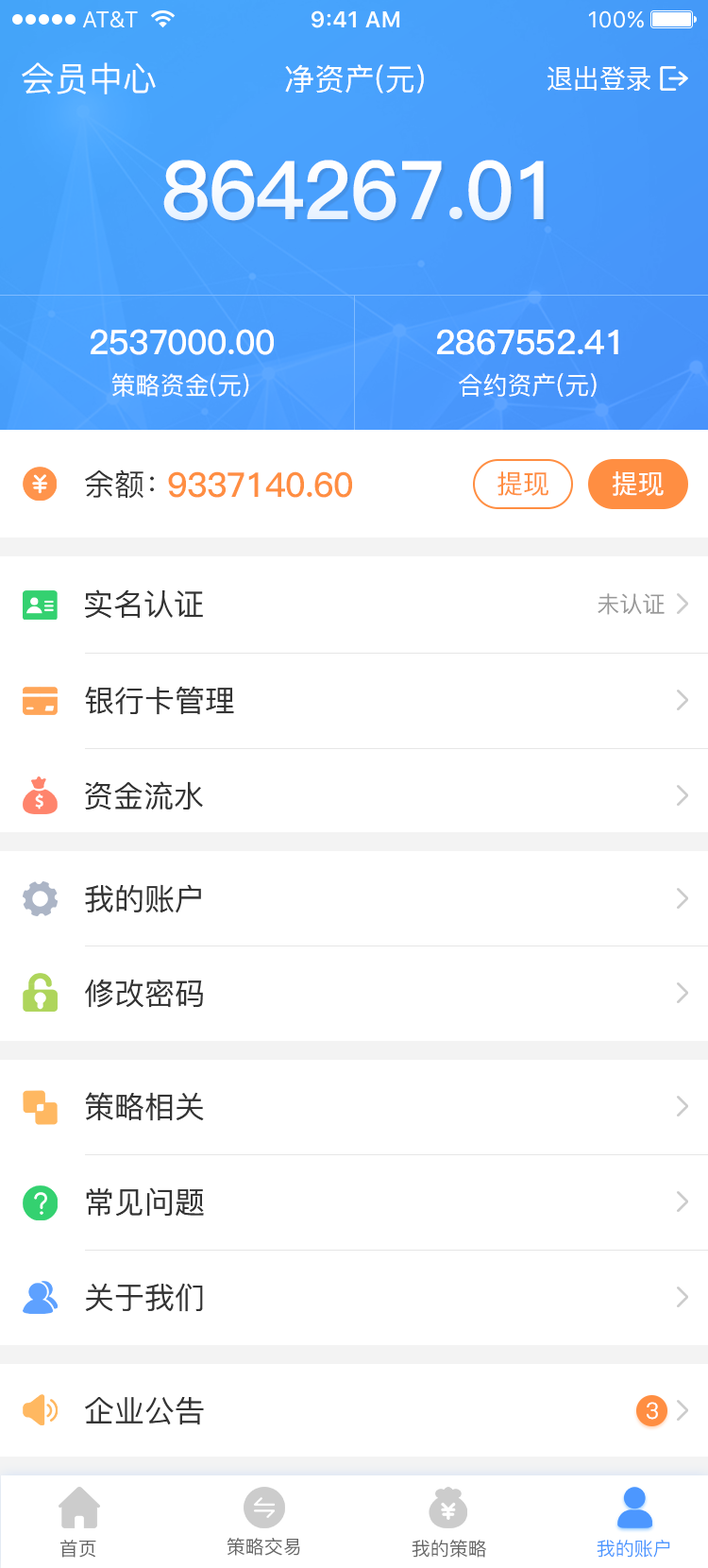
<style>
.page{position:relative;width:708px;height:1568px;background:#ffffff}
.page>*{position:absolute;margin:0}
.t1{font:34px "PingFang-SC-Medium";color:#ffffff}
.t2{font:30.2px "PingFang-SC-Medium";color:#ffffff}
.t3{font:26.4px "PingFang-SC-Medium";color:#ffffff}
.t4{font:81.2px "PingFang-SC-Heavy";letter-spacing:-0.02em;color:#ffffff}
.t5{font:34px "PingFang-SC-Bold";letter-spacing:-0.02em;color:#ffffff}
.t6{font:24.6px "PingFang-SC-Medium";color:#ffffff}
.t7{font:30.2px "PingFang-SC-Medium";color:#333333}
.t8{font:34px "PingFang-SC-Bold";letter-spacing:-0.02em;color:#ff8e42}
.t9{font:26.4px "PingFang-SC-Medium";color:#ff8e42}
.t10{font:22.7px "PingFang-SC-Medium";color:#999999}
.t11{font:22.7px "PingFang-SC-Medium";color:#ffffff}
.t12{font:18.9px "PingFang-SC-Medium";color:#666666}
.t13{font:18.9px "PingFang-SC-Medium";color:#4c97ff}
</style>
<div class="page">
<p class="t1" style="left:22px;top:62px;width:134px;height:32px">会员中心</p>
<p class="t2" style="left:285px;top:64px;width:139px;height:30px">净资产(元)</p>
<p class="t3" style="left:548px;top:66px;width:103px;height:25px">退出登录</p>
<p class="t4" style="left:163px;top:160px;width:381px;height:61px">864267.01</p>
<p class="t5" style="left:91px;top:329px;width:183px;height:26px">2537000.00</p>
<p class="t5" style="left:437px;top:329px;width:182px;height:26px">2867552.41</p>
<p class="t6" style="left:111px;top:373px;width:138px;height:24px">策略资金(元)</p>
<p class="t6" style="left:459px;top:373px;width:138px;height:24px">合约资产(元)</p>
<p class="t7" style="left:85px;top:469px;width:69px;height:30px">余额：</p>
<p class="t8" style="left:168px;top:471px;width:184px;height:27px">9337140.60</p>
<p class="t9" style="left:498px;top:471px;width:51px;height:25px">提现</p>
<p class="t3" style="left:613px;top:471px;width:51px;height:25px">提现</p>
<p class="t7" style="left:85px;top:589px;width:118px;height:30px">实名认证</p>
<p class="t10" style="left:598px;top:593px;width:67px;height:22px">未认证</p>
<p class="t7" style="left:85px;top:686px;width:149px;height:29px">银行卡管理</p>
<p class="t7" style="left:85px;top:781px;width:118px;height:29px">资金流水</p>
<p class="t7" style="left:85px;top:884px;width:116px;height:29px">我的账户</p>
<p class="t7" style="left:85px;top:979px;width:118px;height:29px">修改密码</p>
<p class="t7" style="left:85px;top:1092px;width:119px;height:29px">策略相关</p>
<p class="t7" style="left:86px;top:1187px;width:118px;height:30px">常见问题</p>
<p class="t7" style="left:85px;top:1283px;width:118px;height:29px">关于我们</p>
<p class="t7" style="left:85px;top:1396px;width:119px;height:29px">企业公告</p>
<p class="t11" style="left:647px;top:1402px;width:11px;height:18px">3</p>
<p class="t12" style="left:60px;top:1540px;width:36px;height:18px">首页</p>
<p class="t12" style="left:227px;top:1538px;width:73px;height:18px">策略交易</p>
<p class="t12" style="left:412px;top:1540px;width:74px;height:18px">我的策略</p>
<p class="t13" style="left:597px;top:1540px;width:74px;height:18px">我的账户</p>
</div>
